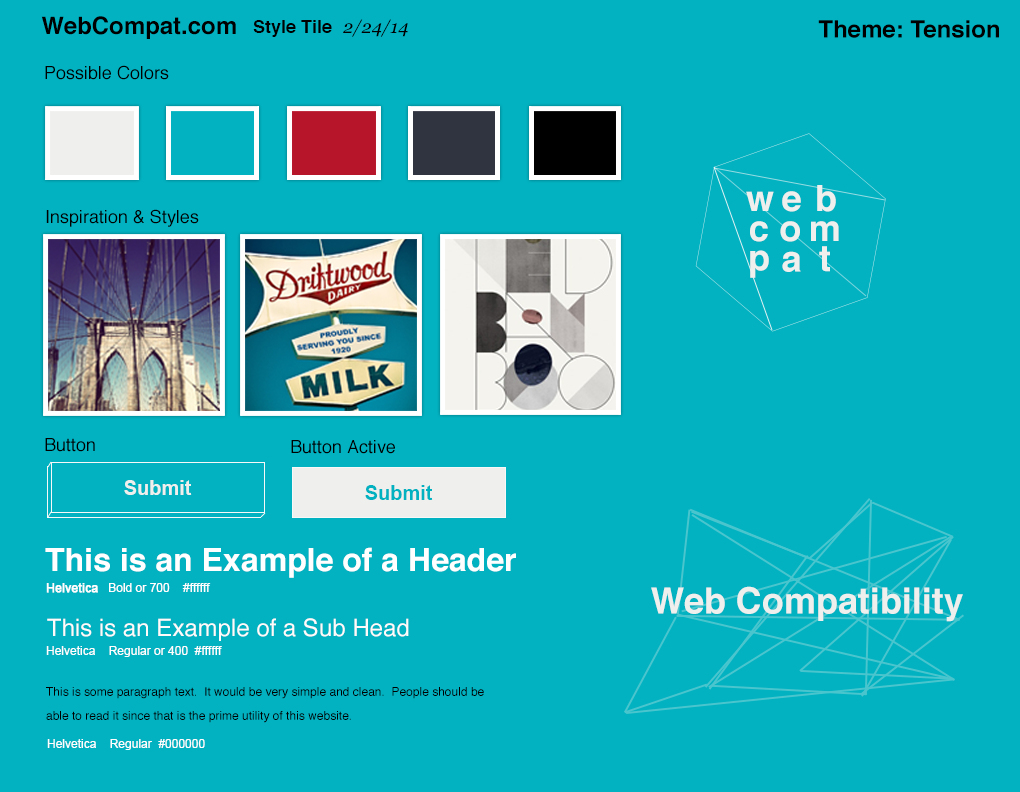
<style>
.page{position:relative;width:1020px;height:792px;background:#02b2c1}
.page>*{position:absolute;margin:0}
.t1{font:24px "Helvetica-Bold";color:#000000}
.t2{font:18px "Helvetica-Bold";color:#000000}
.t3{font:18px "Georgia-Italic";color:#000000}
.t4{font:18px "Helvetica";color:#000000}
.t5{font:36px/30px "Helvetica-Bold";letter-spacing:0.02em;color:#efefed}
.t6{font:36px/30px "Helvetica-Bold";letter-spacing:-0.04em;color:#efefed}
.t7{font:36px/30px "Helvetica-Bold";letter-spacing:0.2em;color:#efefed}
.t8{font:36px "Helvetica-Bold";letter-spacing:0.1em;color:#efefed}
.t9{font:20px "Arial-BoldMT";color:#efefed}
.t10{font:20px "Arial-BoldMT";color:#02b2c1}
.t11{font:32px "Helvetica-Bold";color:#ffffff}
.t12{font:12px "ArialMT";color:#ffffff}
.t13{font:12px "ArialMT";color:#ffffff;font-weight:bold}
.t14{font:36px "Helvetica-Bold";color:#efefed}
.t15{font:24px "Helvetica";color:#fffbfb}
.t16{font:12px/24px "Helvetica";color:#000000}
.t17{font:12px "ArialMT";color:#fefefe}
</style>
<div class="page">
<p class="t1" style="left:41px;top:16px;width:195px;height:23px">WebCompat.com</p>
<p class="t2" style="left:253px;top:20px;width:79px;height:17px">Style Tile</p>
<p class="t3" style="left:343px;top:19px;width:65px;height:18px">2/24/14</p>
<p class="t1" style="left:818px;top:20px;width:181px;height:18px">Theme: Tension</p>
<p class="t4" style="left:45px;top:65px;width:124px;height:15px">Possible Colors</p>
<p class="t5" style="left:746px;top:185px;width:93px;height:87px;text-align:center">w e  b<br>  <span class="t6">c  o m<br>       </span><span class="t7">t</span></p>
<p class="t4" style="left:46px;top:209px;width:153px;height:18px">Inspiration &amp; Styles</p>
<p class="t8" style="left:750px;top:250px;width:19px;height:28px">p</p>
<p class="t8" style="left:782px;top:251px;width:19px;height:21px">a</p>
<p class="t4" style="left:45px;top:438px;width:50px;height:14px">Button</p>
<p class="t4" style="left:291px;top:440px;width:104px;height:14px">Button Active</p>
<p class="t9" style="left:124px;top:480px;width:68px;height:15px">Submit</p>
<p class="t10" style="left:365px;top:485px;width:68px;height:15px">Submit</p>
<p class="t11" style="left:45px;top:547px;width:471px;height:31px">This is an Example of a Header</p>
<p class="t12" style="left:46px;top:583px;width:165px;height:10px"><span class="t13">Helvetica   </span>Bold or 700    #ffffff</p>
<p class="t14" style="left:651px;top:586px;width:312px;height:36px">Web Compatibility</p>
<p class="t15" style="left:47px;top:618px;width:362px;height:23px">This is an Example of a Sub Head</p>
<p class="t12" style="left:46px;top:646px;width:176px;height:11px">Helvetica    Regular or 400  #ffffff</p>
<p class="t16" style="left:46px;top:687px;width:438px;height:36px">This is some paragraph text.  It would be very simple and clean.  People should be able to read it since that is the prime utility of this website.</p>
<p class="t17" style="left:47px;top:739px;width:158px;height:11px">Helvetica    Regular  #000000</p>
</div>
